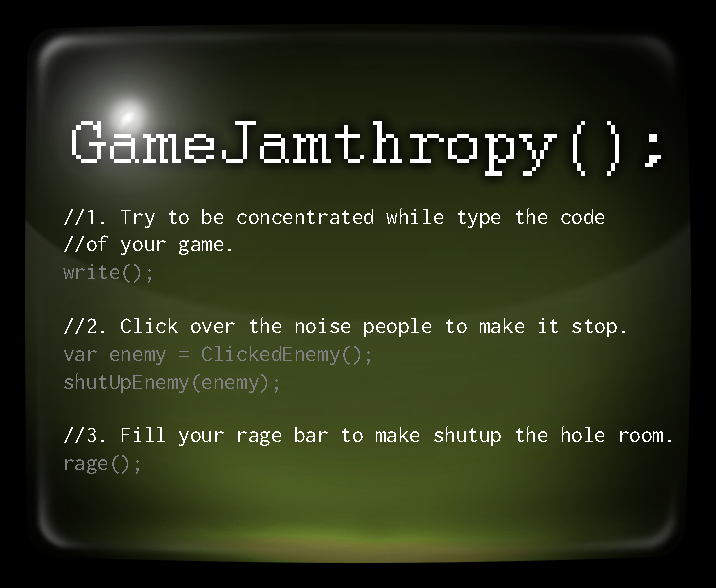
<style>
.page{position:relative;width:716px;height:588px}
.page>*{position:absolute;margin:0}
.t1{font:66.9px "Courier";color:#ffffff}
.t2{font:23.1px "Inconsolata";color:#ffffff}
.t3{font:23.1px "Inconsolata";color:#7f7f7f}
.t4{font:23.1px/54.3px "Inconsolata";color:#ffffff}
.t5{font:23.1px/53.5px "Inconsolata";color:#ffffff}
</style>
<div class="page">
<p class="t1" style="left:72px;top:121px;width:589px;height:55px">GameJamthropy();</p>
<p class="t1" style="left:72px;top:121px;width:589px;height:55px;opacity:0.56">GameJamthropy();</p>
<p class="t2" style="left:63px;top:208px;width:608px;height:266px">//1. Try to be concentrated while type the code <br>//of your game.<br><span class="t3">write();<br></span><span class="t4">//2. Click over the noise people </span>to make it stop.<br><span class="t3">var enemy = ClickedEnemy();<br>shutUpEnemy(enemy);<br></span><span class="t5">//3. Fill your rage bar to make </span>shutup the hole room.<br><span class="t3">rage();</span></p>
</div>
